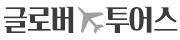
<style>
.page{position:relative;width:180px;height:40px;background:#ffffff}
.page>*{position:absolute;margin:0}
.t1{font:30px "Cafe24DanjunghaeOTF";letter-spacing:-0.04em;color:#3c3c3c}
</style>
<div class="page">
<p class="t1" style="left:4px;top:6px;width:174px;height:27px">글로버    투어스</p>
</div>
